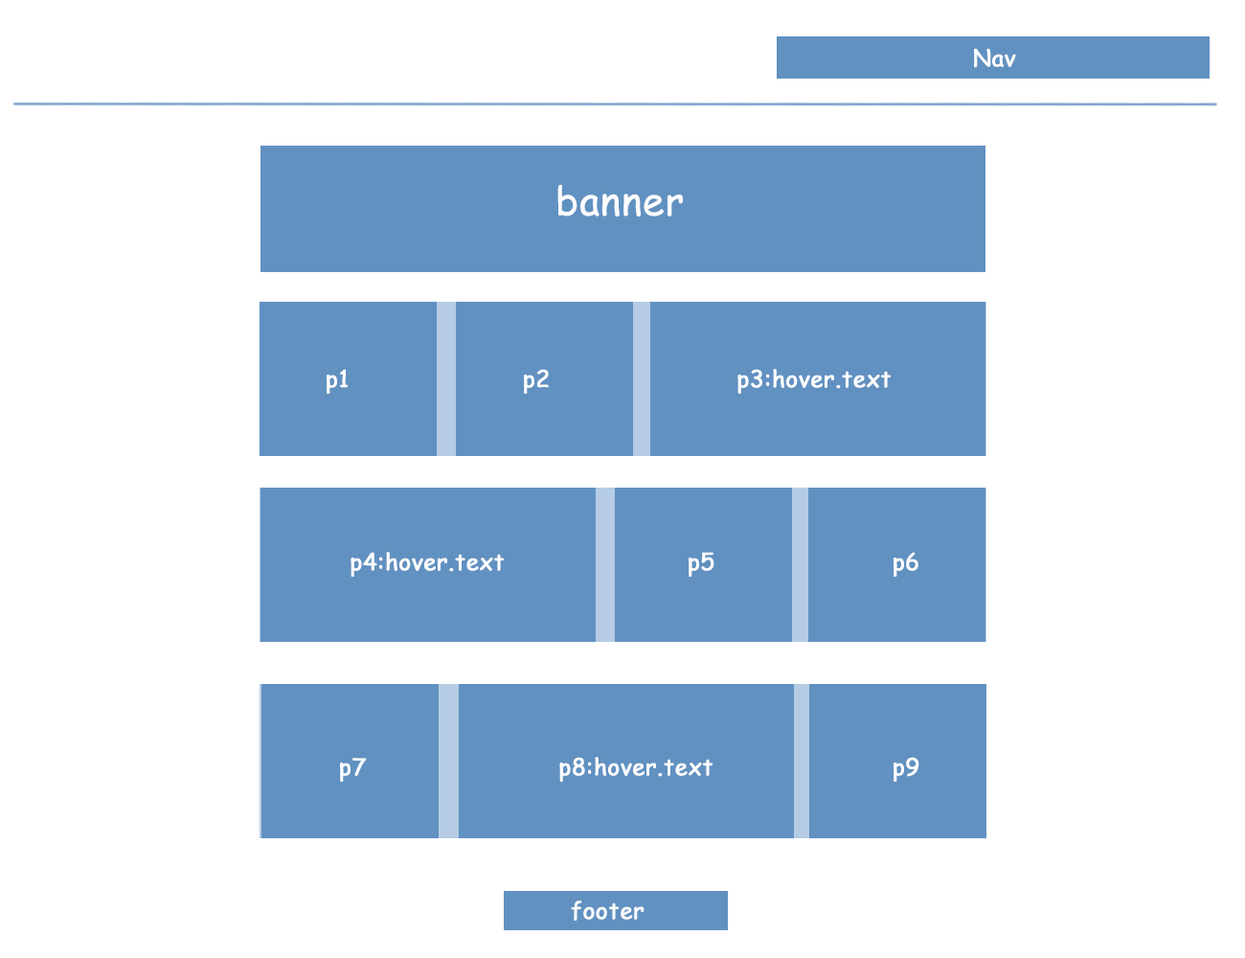
<style>
.page{position:relative;width:1245px;height:958px;background:#ffffff}
.page>*{position:absolute;margin:0}
.t1{font:23px "ComicSansMS";color:#fdfdfd;font-weight:bold}
.t2{font:38.9px "ComicSansMS";color:#fdfdfe;font-weight:bold}
.t3{font:23px "ComicSansMS";color:#ffffff;font-weight:bold}
.t4{font:23px "ComicSansMS";color:#fbfcfc;font-weight:bold}
</style>
<div class="page">
<p class="t1" style="left:974px;top:48px;width:42px;height:20px">Nav</p>
<p class="t2" style="left:557px;top:184px;width:126px;height:32px">banner</p>
<p class="t3" style="left:327px;top:369px;width:21px;height:25px">p1</p>
<p class="t3" style="left:524px;top:369px;width:25px;height:25px">p2</p>
<p class="t3" style="left:737px;top:369px;width:154px;height:25px">p3:hover.text</p>
<p class="t3" style="left:351px;top:552px;width:153px;height:25px">p4:hover.text</p>
<p class="t3" style="left:689px;top:552px;width:25px;height:25px">p5</p>
<p class="t3" style="left:894px;top:552px;width:24px;height:25px">p6</p>
<p class="t3" style="left:340px;top:758px;width:27px;height:24px">p7</p>
<p class="t3" style="left:559px;top:757px;width:154px;height:25px">p8:hover.text</p>
<p class="t3" style="left:894px;top:757px;width:25px;height:25px">p9</p>
<p class="t4" style="left:571px;top:900px;width:74px;height:20px">footer</p>
</div>
